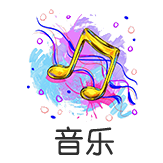
<style>
.page{position:relative;width:163px;height:163px;background:#ffffff}
.page>*{position:absolute;margin:0}
.t1{font:30px "YouYuan";color:#2d2d2d;font-weight:bold}
</style>
<div class="page">
<p class="t1" style="left:54px;top:126px;width:60px;height:30px">音乐</p>
</div>
